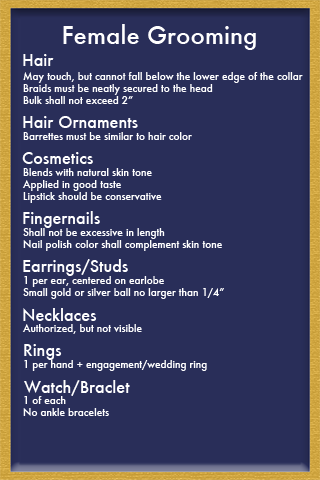
<style>
.page{position:relative;width:320px;height:480px;background:#292e59}
.page>*{position:absolute;margin:0}
.t1{font:24px "Futura-Medium";color:#ffffff}
.t2{font:16px "Futura-Medium";color:#ffffff}
.t3{font:10px "Futura-Medium";color:#ffffff}
</style>
<div class="page">
<p class="t1" style="left:63px;top:24px;width:193px;height:26px">Female Grooming</p>
<p class="t2" style="left:23px;top:54px;width:31px;height:12px">Hair</p>
<p class="t3" style="left:22px;top:72px;width:281px;height:344px">May touch, but cannot fall below the lower edge of the collar<br>Braids must be neatly secured to the head<br>Bulk shall not exceed 2”<br><br><br>Barrettes must be similar to hair color<br><br><br>Blends with natural skin tone<br>Applied in good taste<br>Lipstick should be conservative<br><br><br>Shall not be excessive in length<br>Nail polish color shall complement skin tone<br><br><br>1 per ear, centered on earlobe<br>Small gold or silver ball no larger than 1/4”<br><br><br>Authorized, but not visible<br><br><br>1 per hand + engagement/wedding ring<br><br><br>1 of each<br>No ankle bracelets</p>
<p class="t2" style="left:23px;top:116px;width:115px;height:12px">Hair Ornaments</p>
<p class="t2" style="left:22px;top:152px;width:71px;height:12px">Cosmetics</p>
<p class="t2" style="left:23px;top:211px;width:77px;height:17px">Fingernails</p>
<p class="t2" style="left:23px;top:259px;width:105px;height:17px">Earrings/Studs</p>
<p class="t2" style="left:23px;top:308px;width:74px;height:13px">Necklaces</p>
<p class="t2" style="left:24px;top:344px;width:38px;height:16px">Rings</p>
<p class="t2" style="left:24px;top:380px;width:106px;height:16px">Watch/Braclet</p>
</div>
